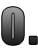
<style>
.page{position:relative;width:38px;height:53px;background:#ffffff}
.page>*{position:absolute;margin:0}
.t1{font:45.6px "Impact";letter-spacing:0.075em}
</style>
<div class="page">
<p class="t1" style="left:2px;top:7px;width:35px;height:38px">0.</p>
</div>
